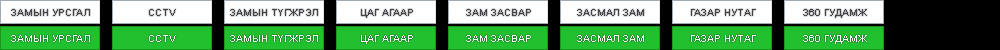
<style>
.page{position:relative;width:1000px;height:50px;background:#ffffff}
.page>*{position:absolute;margin:0}
.t1{font:10px "ArialMT";color:#434548;text-transform:uppercase}
.t2{font:10px "ArialMT";color:#434548}
.t3{font:10px "ArialMT";color:#ffffff;text-transform:uppercase}
.t4{font:10px "ArialMT";color:#ffffff}
</style>
<div class="page">
<p class="t1" style="left:11px;top:9px;width:79px;height:7px">замын урсгал</p>
<p class="t2" style="left:149px;top:9px;width:27px;height:7px">CCTV</p>
<p class="t1" style="left:230px;top:9px;width:88px;height:7px">замын түгжрэл</p>
<p class="t1" style="left:361px;top:9px;width:52px;height:9px">Цаг агаар</p>
<p class="t1" style="left:466px;top:9px;width:65px;height:7px">Зам засвар</p>
<p class="t1" style="left:577px;top:9px;width:67px;height:7px">Засмал зам</p>
<p class="t1" style="left:691px;top:9px;width:65px;height:7px">Газар нутаг</p>
<p class="t1" style="left:803px;top:9px;width:64px;height:9px">360 гудамж</p>
<p class="t3" style="left:11px;top:35px;width:79px;height:7px">замын урсгал</p>
<p class="t4" style="left:149px;top:35px;width:27px;height:7px">CCTV</p>
<p class="t3" style="left:230px;top:35px;width:88px;height:7px">замын түгжрэл</p>
<p class="t3" style="left:361px;top:35px;width:52px;height:9px">Цаг агаар</p>
<p class="t3" style="left:466px;top:35px;width:65px;height:7px">Зам засвар</p>
<p class="t3" style="left:577px;top:35px;width:67px;height:7px">Засмал зам</p>
<p class="t3" style="left:691px;top:35px;width:65px;height:7px">Газар нутаг</p>
<p class="t3" style="left:803px;top:35px;width:64px;height:9px">360 гудамж</p>
</div>
